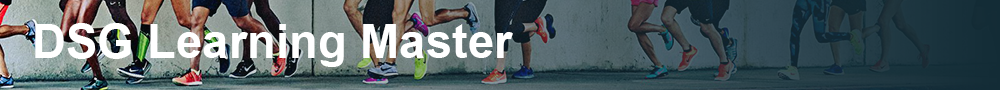
<style>
.page{position:relative;width:1000px;height:90px}
.page>*{position:absolute;margin:0}
.t1{font:47.3px "Arial-BoldMT";color:#ffffff}
</style>
<div class="page">
<p class="t1" style="left:35px;top:23px;width:478px;height:44px">DSG Learning Master</p>
</div>
